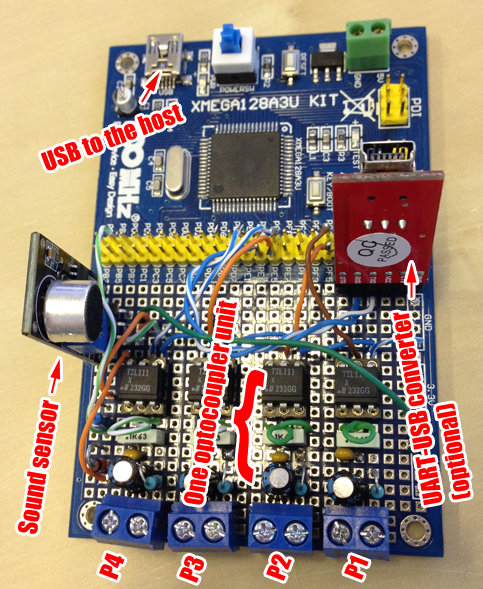
<style>
.page{position:relative;width:483px;height:589px}
.page>*{position:absolute;margin:0}
.t1{font:24px "Impact";color:#ff0000}
.t2{font:117.6px "Impact";color:#ff0000;scale:0.68 1}
</style>
<div class="page">
<p class="t1" style="left:40px;top:104px;width:144px;height:67px;rotate:-21deg">USB to the host</p>
<p class="t1" style="left:184px;top:300px;width:53px;height:205px;rotate:-80deg">One optocoupler unit</p>
<p class="t1" style="left:392px;top:312px;width:79px;height:194px;rotate:-100deg">UART-USB converter<br>(optional)</p>
<p class="t2" style="left:233px;top:370px;width:32px;height:114px;rotate:27deg">{</p>
<p class="t1" style="left:18px;top:399px;width:41px;height:135px;rotate:-80deg">Sound sensor</p>
<p class="t1" style="left:99px;top:553px;width:26px;height:27px;rotate:-69deg">P4</p>
<p class="t1" style="left:179px;top:556px;width:25px;height:27px;rotate:-69deg">P3</p>
<p class="t1" style="left:266px;top:554px;width:26px;height:27px;rotate:-69deg">P2</p>
<p class="t1" style="left:344px;top:555px;width:25px;height:25px;rotate:-69deg">P1</p>
</div>
